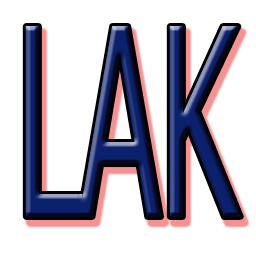
<style>
.page{position:relative;width:256px;height:256px;background:#ffffff}
.page>*{position:absolute;margin:0}
.t1{font:262.7px "Tahoma";scale:0.51 1}
</style>
<div class="page">
<p class="t1" style="left:25px;top:26px;width:216px;height:191px">LAK</p>
</div>
